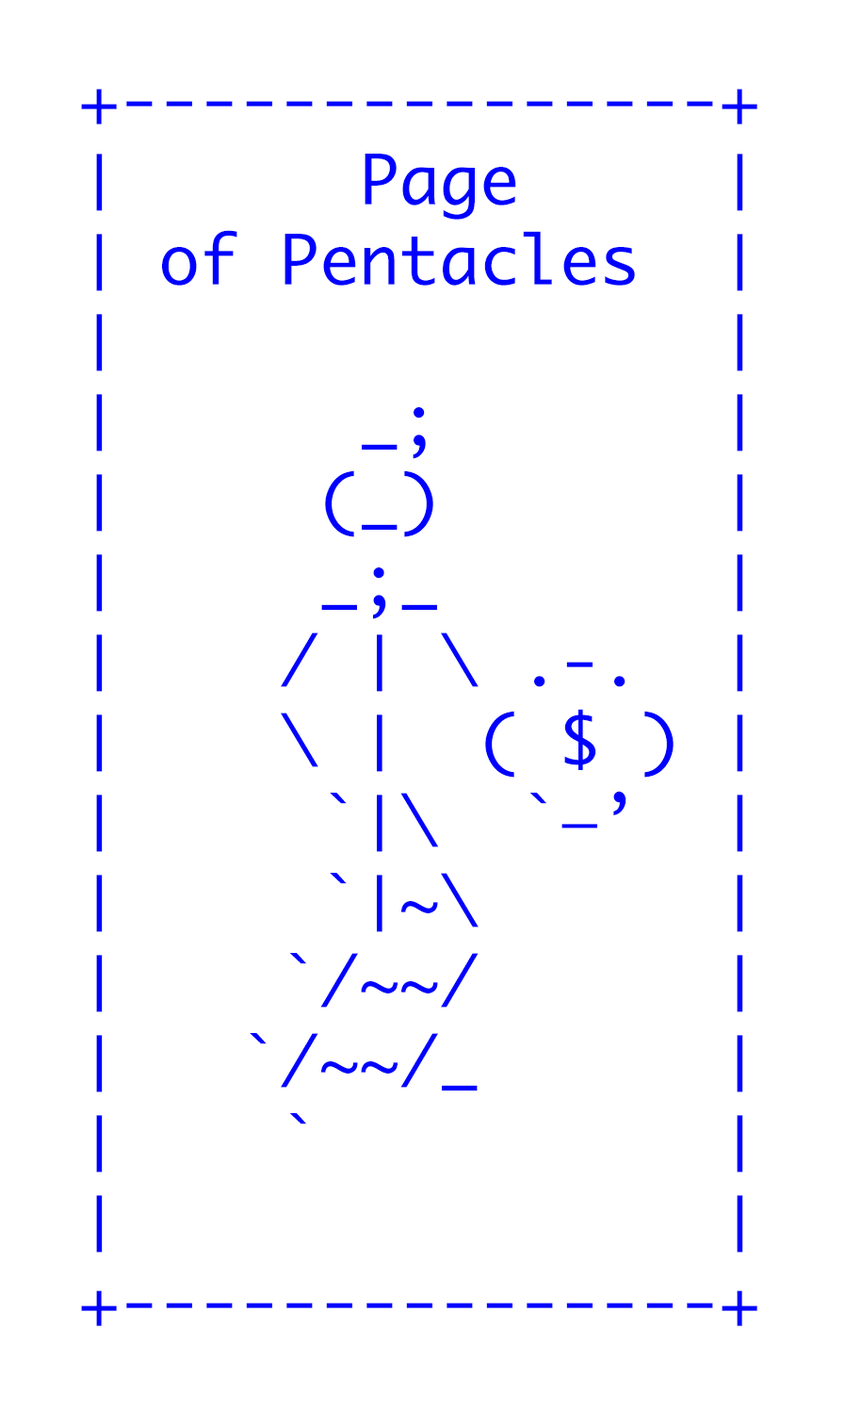
<style>
.page{position:relative;width:845px;height:1411px;background:#ffffff}
.page>*{position:absolute;margin:0}
.t1{font:66.7px "Monaco";color:#0000ff}
</style>
<div class="page">
<p class="t1" style="left:81px;top:89px;width:677px;height:1237px">+---------------+<br>│      Page     │<br>│ of Pentacles  │<br>│               │<br>│      _;       │<br>│     (_)       │<br>│     _;_       │<br>│    / │ \ .-.  │ <br>│    \ │  ( $ ) │ <br>│     `│\  `—’  │<br>│     `│~\      │ <br>│    `/~~/      │ <br>│   `/~~/_      │<br>│    `          │<br>│               │<br>+---------------+</p>
</div>
